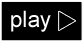
<style>
.page{position:relative;width:83px;height:42px;background:#000000}
.page>*{position:absolute;margin:0}
.t1{font:22.8px "ArialMT";color:#ffffff}
</style>
<div class="page">
<p class="t1" style="left:11px;top:10px;width:40px;height:22px">play</p>
</div>
